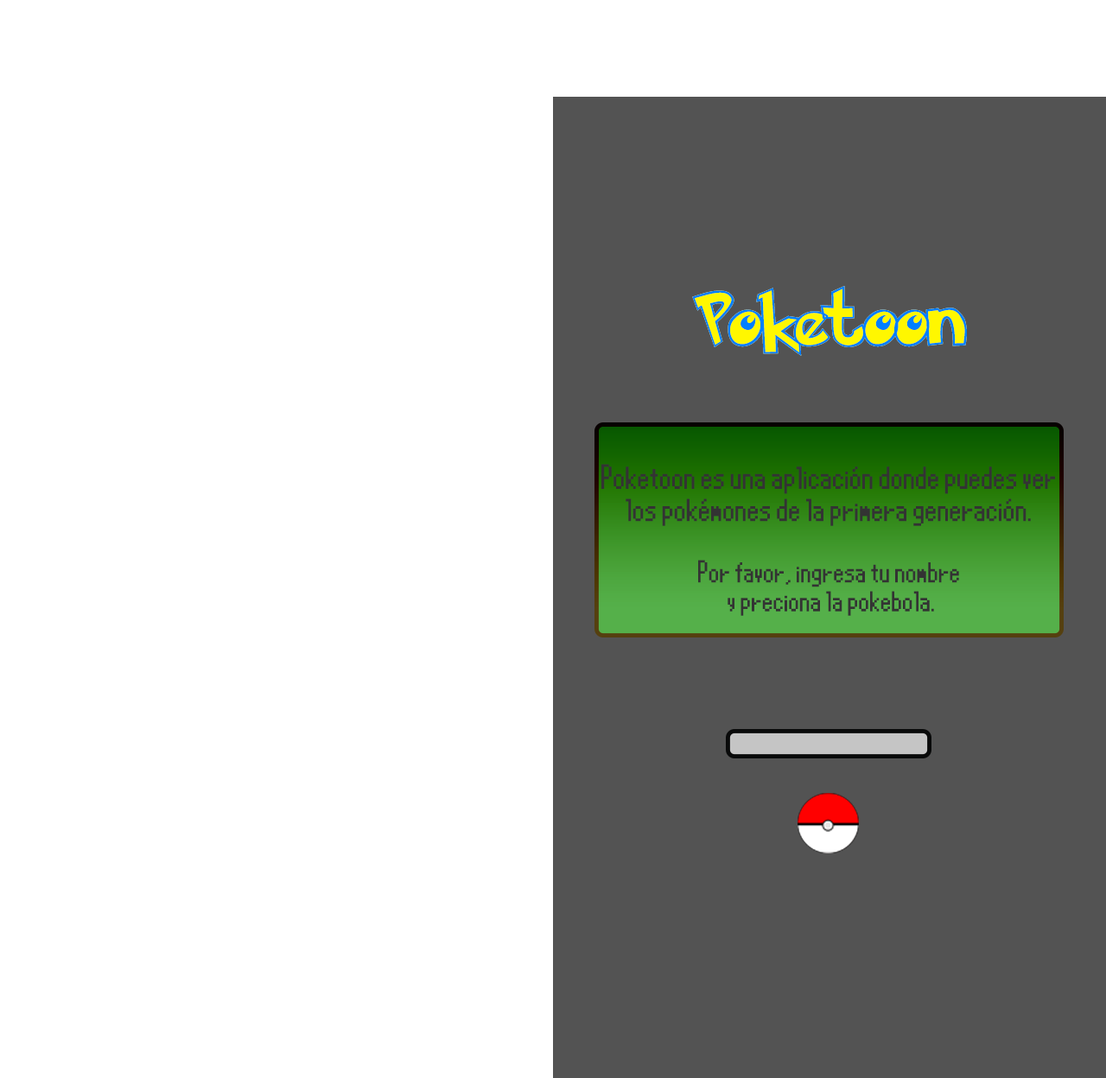
<style>
.page{position:relative;width:1106px;height:1078px;background:#ffffff}
.page>*{position:absolute;margin:0}
.t1{font:62.2px "PokemonSolidNormal";color:#fff700}
.t2{font:62.2px "PokemonHollowNormal";color:#007fff}
.t3{font:26.8px "Pokemon-X-and-Y";color:#333333}
.t4{font:24.1px "Pokemon-X-and-Y";color:#333333}
</style>
<div class="page">
<p class="t1" style="left:692px;top:286px;width:275px;height:70px">Poketoon</p>
<p class="t2" style="left:692px;top:286px;width:275px;height:70px">Poketoon</p>
<p class="t3" style="left:601px;top:464px;width:454px;height:62px;text-align:center">Poketoon es una aplicación donde puedes ver<br>los pokémones de la primera generación.</p>
<p class="t4" style="left:698px;top:560px;width:261px;height:56px;text-align:center">Por favor, ingresa tu nombre<br> y preciona la pokebola.</p>
</div>
